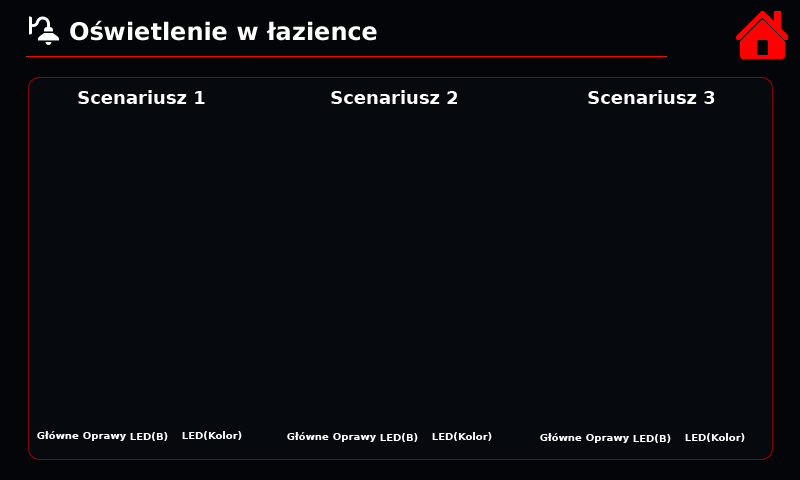
<style>
.page{position:relative;width:800px;height:480px;background:#06090d}
.page>*{position:absolute;margin:0}
.t1{font:24px "DejaVuSans-Bold";color:#ffffff}
.t2{font:18px "DejaVuSans-Bold";color:#ffffff}
.t3{font:10px "DejaVuSans-Bold";color:#ffffff}
</style>
<div class="page">
<p class="t1" style="left:70px;top:20px;width:307px;height:21px">Oświetlenie w łazience</p>
<p class="t2" style="left:78px;top:90px;width:127px;height:14px">Scenariusz 1</p>
<p class="t2" style="left:331px;top:90px;width:126px;height:14px">Scenariusz 2</p>
<p class="t2" style="left:588px;top:90px;width:127px;height:14px">Scenariusz 3</p>
<p class="t3" style="left:37px;top:431px;width:42px;height:8px">Główne</p>
<p class="t3" style="left:83px;top:432px;width:43px;height:9px">Oprawy</p>
<p class="t3" style="left:130px;top:432px;width:38px;height:9px">LED(B)</p>
<p class="t3" style="left:182px;top:431px;width:60px;height:9px">LED(Kolor)</p>
<p class="t3" style="left:287px;top:432px;width:42px;height:8px">Główne</p>
<p class="t3" style="left:333px;top:433px;width:43px;height:9px">Oprawy</p>
<p class="t3" style="left:380px;top:433px;width:38px;height:9px">LED(B)</p>
<p class="t3" style="left:432px;top:432px;width:60px;height:9px">LED(Kolor)</p>
<p class="t3" style="left:540px;top:433px;width:42px;height:8px">Główne</p>
<p class="t3" style="left:586px;top:434px;width:43px;height:9px">Oprawy</p>
<p class="t3" style="left:633px;top:434px;width:38px;height:9px">LED(B)</p>
<p class="t3" style="left:685px;top:433px;width:60px;height:9px">LED(Kolor)</p>
</div>
